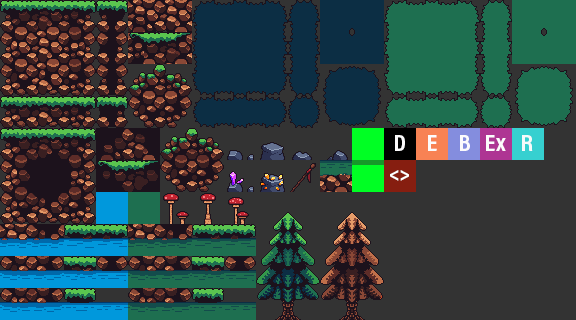
<style>
.page{position:relative;width:576px;height:320px;background:#333333}
.page>*{position:absolute;margin:0}
.t1{font:24px "AcuminProCond-Bold";color:#fcfbfc}
.t2{font:24px "AcuminProCond-Bold";color:#f6fafa}
.t3{font:24px "AcuminProCond-Bold";color:#ffffff}
</style>
<div class="page">
<p class="t1" style="left:395px;top:135px;width:10px;height:16px">D</p>
<p class="t1" style="left:428px;top:135px;width:9px;height:16px">E</p>
<p class="t1" style="left:460px;top:135px;width:10px;height:16px">B</p>
<p class="t1" style="left:486px;top:135px;width:20px;height:16px">Ex</p>
<p class="t2" style="left:522px;top:135px;width:11px;height:16px">R</p>
<p class="t3" style="left:390px;top:170px;width:19px;height:11px">&lt;&gt;</p>
</div>
